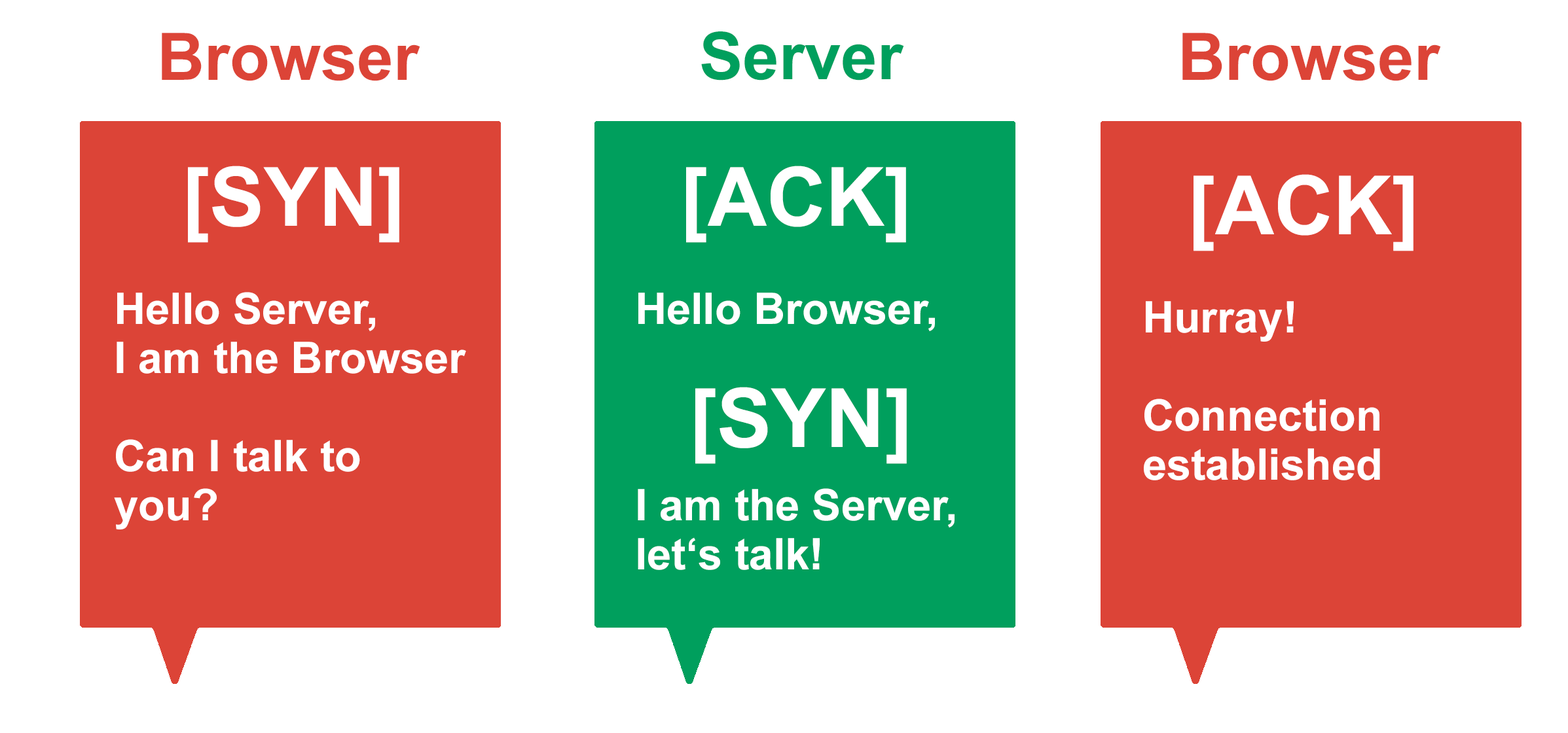
<style>
.page{position:relative;width:1568px;height:733px;background:#ffffff}
.page>*{position:absolute;margin:0}
.t1{font:65.5px "Arial-BoldMT";color:#dc4437}
.t2{font:65.5px "Arial-BoldMT";color:#009f5d}
.t3{font:43.6px/49.1px "Arial-BoldMT";color:#ffffff}
.t4{font:81.8px/49.1px "Arial-BoldMT";color:#ffffff}
.t5{font:49.1px/49.1px "Arial-BoldMT";color:#ffffff}
</style>
<div class="page">
<p class="t1" style="left:162px;top:33px;width:258px;height:48px">Browser</p>
<p class="t2" style="left:701px;top:31px;width:203px;height:50px">Server</p>
<p class="t1" style="left:1182px;top:33px;width:259px;height:48px">Browser</p>
<p class="t3" style="left:114px;top:166px;width:352px;height:364px"><span class="t4"><br>   [SYN]<br><br></span>Hello Server,<br>I am the Browser<br><br>Can I talk to<br>you?</p>
<p class="t3" style="left:638px;top:166px;width:317px;height:404px"><span class="t4">  [ACK]<br></span><br>Hello Browser,<br><span class="t5"><br>    </span><span class="t4">[SYN]<br></span><br>I am the Server, let‘s talk!</p>
<p class="t3" style="left:1144px;top:174px;width:269px;height:307px"><span class="t4">  [ACK]<br><br></span>Hurray!<br><br>Connection<br>established</p>
</div>
